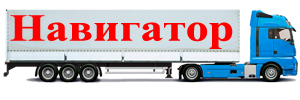
<style>
.page{position:relative;width:300px;height:100px;background:#ffffff}
.page>*{position:absolute;margin:0}
.t1{font:38.2px "TimesNewRomanPS-BoldMT";color:#ff0000;scale:1.2 1}
</style>
<div class="page">
<p class="t1" style="left:10px;top:15px;width:223px;height:34px">Навигатор</p>
</div>
